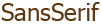
<style>
.page{position:relative;width:102px;height:26px;background:#ffffff}
.page>*{position:absolute;margin:0}
.t1{font:24px "Tahoma";color:#603913}
</style>
<div class="page">
<p class="t1" style="left:1px;top:2px;width:99px;height:19px">SansSerif</p>
</div>
